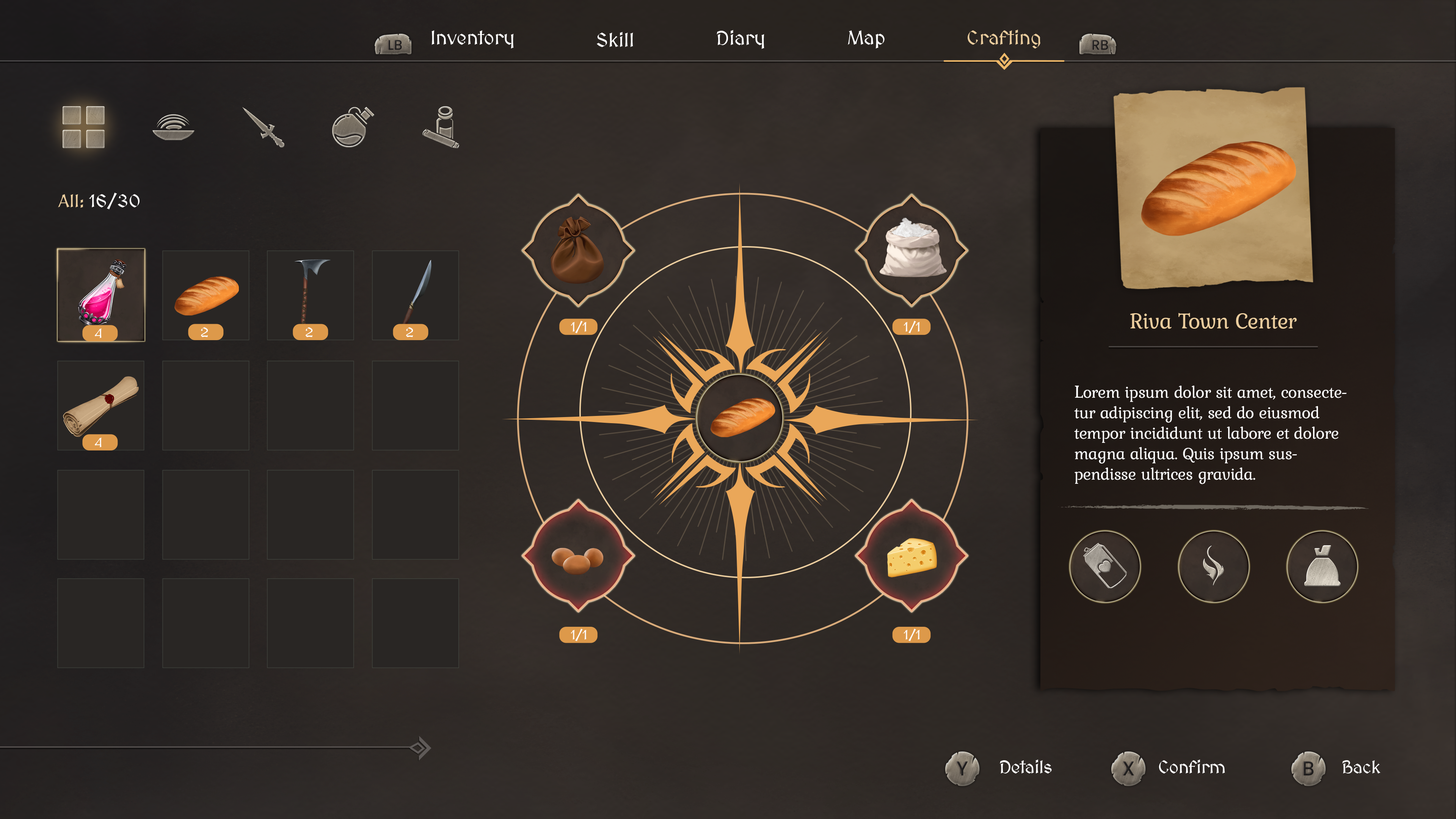
<style>
.page{position:relative;width:1456px;height:819px}
.page>*{position:absolute;margin:0}
.t1{font:19.8px "MedievalSharp";color:#ffffff}
.t2{font:19.8px "MedievalSharp";color:#ebcd9e}
.t3{font:18.2px "MedievalSharp";color:#ffffff}
.t4{font:18.2px "MedievalSharp";color:#ecce9f}
.t5{font:22.7px "Kurale-Regular";letter-spacing:-0.02em;color:#ebcd9e}
.t6{font:13.6px "MedievalSharp";color:#ffffff}
.t7{font:17.1px "Kurale-Regular";letter-spacing:-0.02em;color:#ffffff}
.t8{font:18.2px "Kurale-Regular";letter-spacing:-0.02em;color:#ffffff}
.t9{font:18.2px "MedievalSharp";letter-spacing:-0.02em;color:#ffffff}
</style>
<div class="page">
<p class="t1" style="left:717px;top:30px;width:47px;height:19px">Diary</p>
<p class="t2" style="left:968px;top:30px;width:72px;height:19px">Crafting</p>
<p class="t1" style="left:431px;top:30px;width:83px;height:19px">Inventory</p>
<p class="t1" style="left:597px;top:32px;width:36px;height:15px">Skill</p>
<p class="t1" style="left:848px;top:30px;width:37px;height:19px">Map</p>
<p class="t3" style="left:58px;top:193px;width:82px;height:16px"><span class="t4">All:</span> 16/30</p>
<p class="t5" style="left:1130px;top:313px;width:167px;height:16px">Riva Town Center</p>
<p class="t6" style="left:95px;top:328px;width:7px;height:10px">4</p>
<p class="t6" style="left:201px;top:327px;width:7px;height:10px">2</p>
<p class="t6" style="left:306px;top:327px;width:7px;height:10px">2</p>
<p class="t6" style="left:406px;top:327px;width:7px;height:10px">2</p>
<p class="t6" style="left:571px;top:321px;width:16px;height:12px">1/1</p>
<p class="t6" style="left:904px;top:321px;width:16px;height:12px">1/1</p>
<p class="t7" style="left:1074px;top:386px;width:273px;height:98px"><span class="t8">L</span>orem ipsum dolor sit amet, consectetur adipiscing elit, sed do eiusmod tempor incididunt ut labore et dolore magna aliqua. Quis ipsum suspendisse ultrices gravida.</p>
<p class="t6" style="left:95px;top:438px;width:7px;height:9px">4</p>
<p class="t6" style="left:571px;top:629px;width:16px;height:12px">1/1</p>
<p class="t6" style="left:904px;top:629px;width:16px;height:12px">1/1</p>
<p class="t9" style="left:1000px;top:759px;width:52px;height:14px">Details</p>
<p class="t9" style="left:1159px;top:759px;width:66px;height:14px">Confirm</p>
<p class="t9" style="left:1342px;top:760px;width:39px;height:13px">Back</p>
</div>
